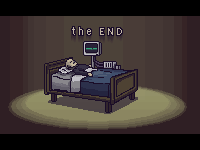
<style>
.page{position:relative;width:200px;height:150px;background:#000000}
.page>*{position:absolute;margin:0}
.t1{font:11px "FranklinGothic-Medium";letter-spacing:0.18em;color:#bdb2a8}
</style>
<div class="page">
<p class="t1" style="left:72px;top:27px;width:50px;height:8px">the END</p>
</div>
